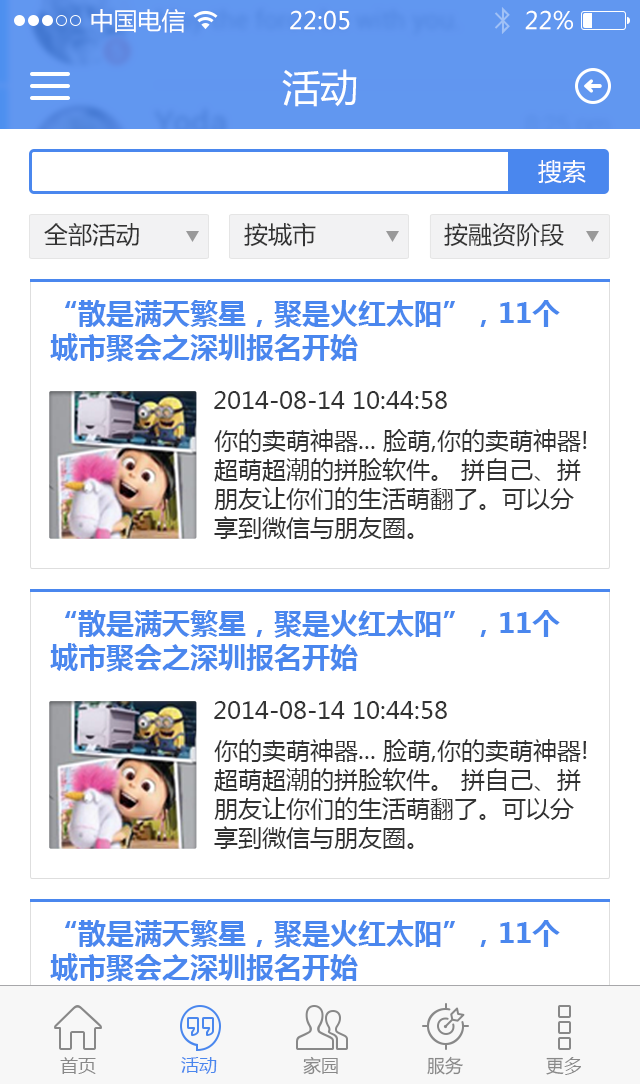
<style>
.page{position:relative;width:640px;height:1084px;background:#ffffff}
.page>*{position:absolute;margin:0}
.t1{font:24px "MicrosoftYaHei";color:#ffffff}
.t2{font:38px "MicrosoftYaHei";color:#ffffff}
.t3{font:24px "MicrosoftYaHei";color:#fffefe}
.t4{font:24px "MicrosoftYaHei";color:#333333}
.t5{font:28px "MicrosoftYaHei-Bold";color:#4a87ee}
.t6{font:18px "MicrosoftYaHei";color:#888888}
.t7{font:18px "MicrosoftYaHei";color:#4a87ee}
</style>
<div class="page">
<p class="t1" style="left:91px;top:9px;width:94px;height:24px">中国电信</p>
<p class="t1" style="left:290px;top:10px;width:60px;height:20px">22:05</p>
<p class="t1" style="left:525px;top:10px;width:48px;height:20px">22%</p>
<p class="t2" style="left:282px;top:69px;width:75px;height:38px">活动</p>
<p class="t3" style="left:538px;top:160px;width:48px;height:24px">搜索</p>
<p class="t4" style="left:244px;top:222px;width:72px;height:25px">按城市</p>
<p class="t4" style="left:444px;top:222px;width:120px;height:25px">按融资阶段</p>
<p class="t4" style="left:44px;top:223px;width:95px;height:24px">全部活动</p>
<p class="t5" style="left:50px;top:300px;width:510px;height:62px">“散是满天繁星，聚是火红太阳”，11个城市聚会之深圳报名开始</p>
<p class="t4" style="left:214px;top:391px;width:233px;height:18px">2014-08-14 10:44:58</p>
<p class="t4" style="left:214px;top:429px;width:373px;height:110px">你的卖萌神器... 脸萌,你的卖萌神器!超萌超潮的拼脸软件。 拼自己、拼朋友让你们的生活萌翻了。可以分享到微信与朋友圈。</p>
<p class="t5" style="left:50px;top:610px;width:510px;height:62px">“散是满天繁星，聚是火红太阳”，11个城市聚会之深圳报名开始</p>
<p class="t4" style="left:214px;top:701px;width:233px;height:18px">2014-08-14 10:44:58</p>
<p class="t4" style="left:214px;top:739px;width:373px;height:110px">你的卖萌神器... 脸萌,你的卖萌神器!超萌超潮的拼脸软件。 拼自己、拼朋友让你们的生活萌翻了。可以分享到微信与朋友圈。</p>
<p class="t5" style="left:50px;top:920px;width:510px;height:62px">“散是满天繁星，聚是火红太阳”，11个城市聚会之深圳报名开始</p>
<p class="t6" style="left:60px;top:1057px;width:36px;height:17px">首页</p>
<p class="t7" style="left:181px;top:1057px;width:36px;height:17px">活动</p>
<p class="t6" style="left:303px;top:1056px;width:35px;height:19px">家园</p>
<p class="t6" style="left:427px;top:1056px;width:36px;height:19px">服务</p>
<p class="t6" style="left:546px;top:1057px;width:35px;height:18px">更多</p>
</div>
